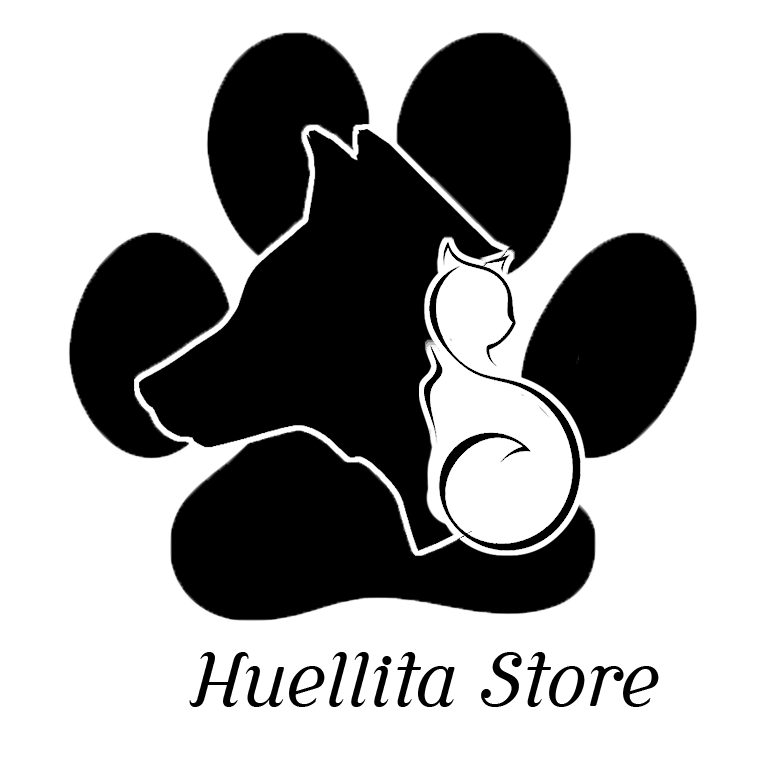
<style>
.page{position:relative;width:765px;height:765px;background:#ffffff}
.page>*{position:absolute;margin:0}
.t1{font:72px "CursiveSerif-Book";color:#000000}
</style>
<div class="page">
<p class="t1" style="left:189px;top:652px;width:470px;height:55px">Huellita Store</p>
</div>
